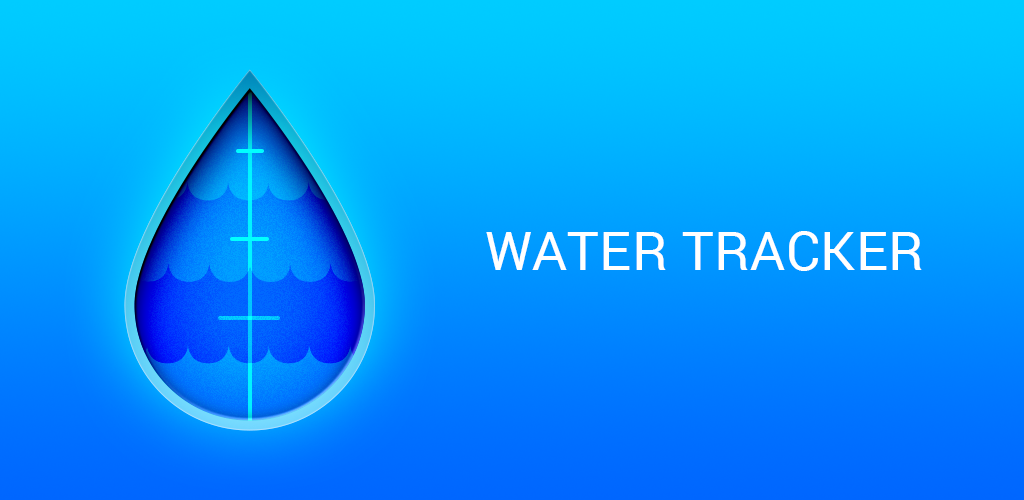
<style>
.page{position:relative;width:1024px;height:500px}
.page>*{position:absolute;margin:0}
.t1{font:54.4px "Roboto-Regular";letter-spacing:0.005em;color:#ffffff;text-transform:uppercase}
</style>
<div class="page">
<p class="t1" style="left:486px;top:231px;width:436px;height:40px">Water Tracker</p>
</div>
